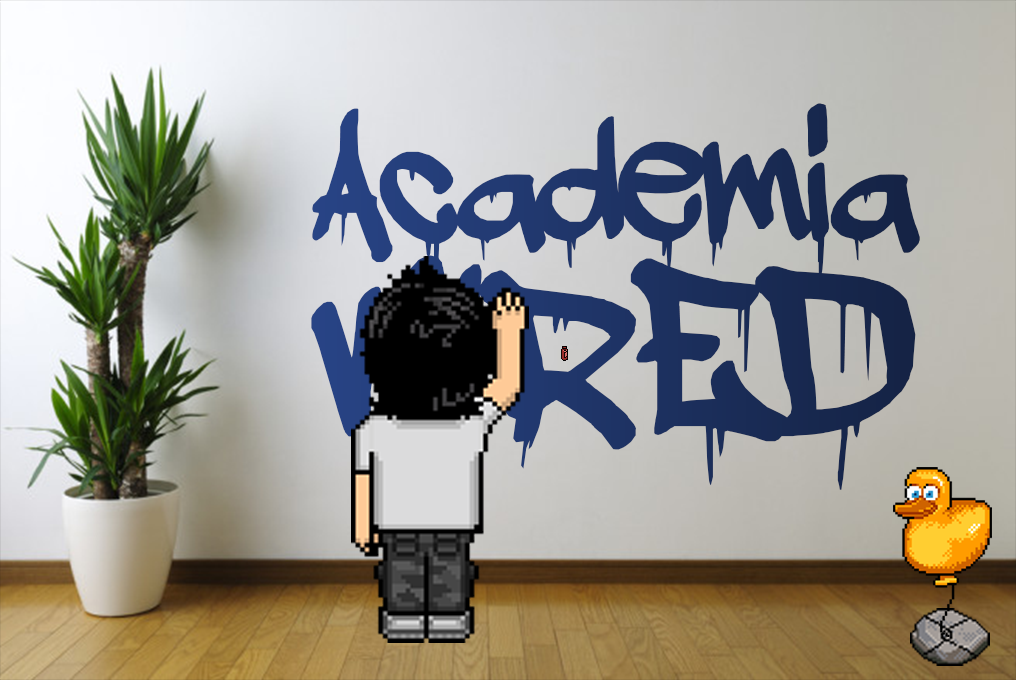
<style>
.page{position:relative;width:1016px;height:680px}
.page>*{position:absolute;margin:0}
.t1{font:211.6px/281px "adrippingmarker";letter-spacing:-0.005em;scale:0.96 1}
.t2{font:211.6px/124px "adrippingmarker";letter-spacing:-0.005em;scale:0.96 1}
.t3{font:302.6px/197px "adrippingmarker";letter-spacing:-0.005em;scale:0.96 1}
</style>
<div class="page">
<p class="t1" style="left:311px;top:103px;width:609px;height:394px;text-align:center">Academ<span class="t2">ia<br></span><span class="t3">WIRED</span></p>
</div>
